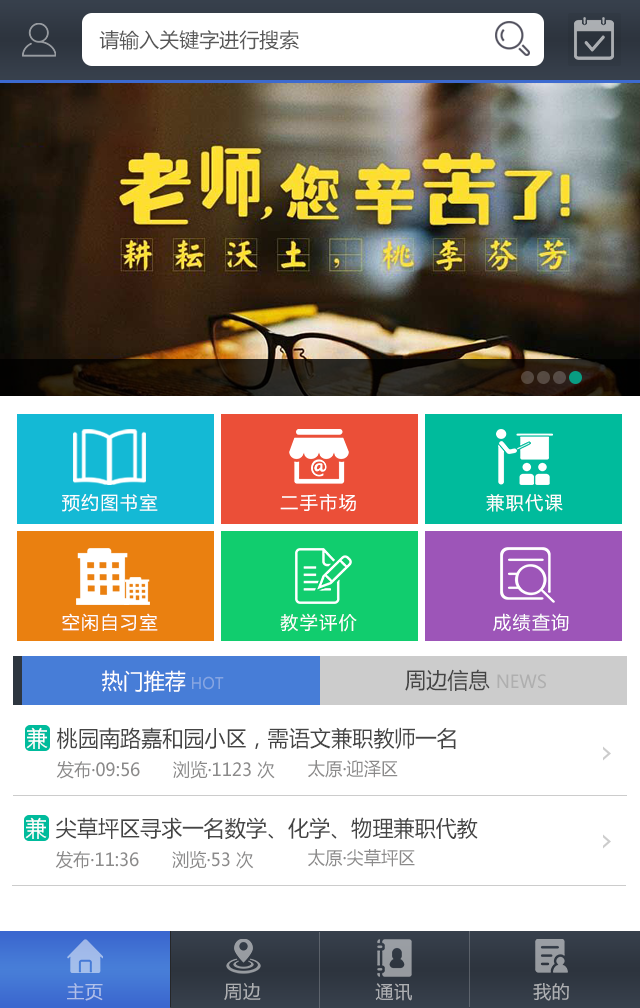
<style>
.page{position:relative;width:640px;height:1008px;background:#ffffff}
.page>*{position:absolute;margin:0}
.t1{font:20px "MicrosoftYaHei";color:#585858}
.t2{font:22px "MicrosoftYaHei";color:#ffffff;scale:0.96 1}
.t3{font:16px "MicrosoftYaHei";color:#ffffff;scale:0.96 1}
.t4{font:22px "MicrosoftYaHei";color:#444444;scale:0.96 1}
.t5{font:18px "MicrosoftYaHei";color:#444444;scale:0.96 1}
.t6{font:18px "MicrosoftYaHei";color:#8b8a8a;scale:0.96 1}
.t7{font:18px "MicrosoftYaHei";letter-spacing:0.038em;color:#aeb0b3}
</style>
<div class="page">
<p class="t1" style="left:99px;top:30px;width:200px;height:20px">请输入关键字进行搜索</p>
<p class="t2" style="left:102px;top:670px;width:122px;height:22px">热门推荐 <span class="t3">HOT</span></p>
<p class="t4" style="left:405px;top:669px;width:141px;height:22px">周边信息 <span class="t5">NEWS</span></p>
<p class="t2" style="left:26px;top:727px;width:22px;height:22px">兼</p>
<p class="t4" style="left:57px;top:727px;width:399px;height:23px">桃园南路嘉和园小区，需语文兼职教师一名</p>
<p class="t6" style="left:56px;top:761px;width:84px;height:18px">发布·09:56</p>
<p class="t6" style="left:173px;top:761px;width:102px;height:18px">浏览·1123 次</p>
<p class="t6" style="left:308px;top:760px;width:90px;height:18px">太原·迎泽区</p>
<p class="t2" style="left:25px;top:817px;width:22px;height:22px">兼</p>
<p class="t4" style="left:55px;top:817px;width:423px;height:23px">尖草坪区寻求一名数学、化学、物理兼职代教</p>
<p class="t6" style="left:55px;top:851px;width:84px;height:18px">发布·11:36</p>
<p class="t6" style="left:172px;top:851px;width:82px;height:18px">浏览·53 次</p>
<p class="t6" style="left:308px;top:849px;width:107px;height:18px">太原·尖草坪区</p>
<p class="t7" style="left:67px;top:983px;width:502px;height:18px">主页                    周边                   通讯                    我的</p>
</div>
